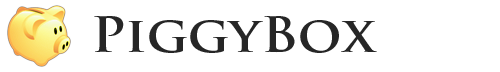
<style>
.page{position:relative;width:500px;height:72px;background:#ffffff}
.page>*{position:absolute;margin:0}
.t1{font:48px "TrajanPro-Bold";color:#262626;scale:1.1 1}
</style>
<div class="page">
<p class="t1" style="left:94px;top:16px;width:283px;height:37px">PiggyBox</p>
</div>
